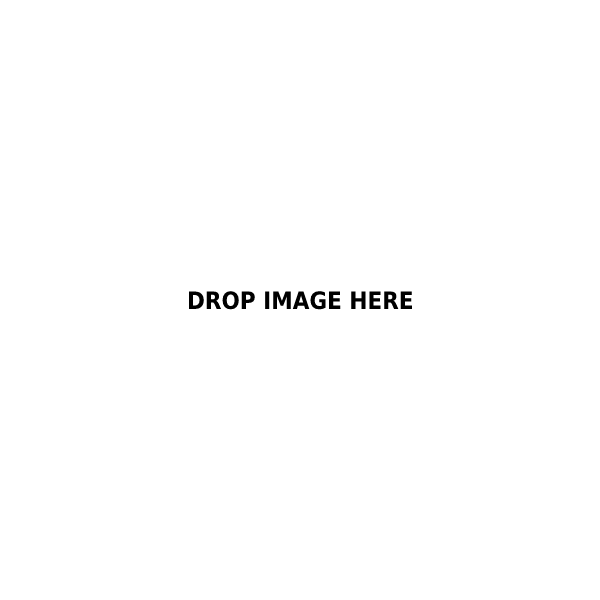
<style>
.page{position:relative;width:600px;height:600px;background:#ffffff}
.page>*{position:absolute;margin:0}
.t1{font:24px "DejaVuSansCondensed-Bold";color:#000000}
</style>
<div class="page">
<p class="t1" style="left:188px;top:291px;width:225px;height:19px">DROP IMAGE HERE</p>
</div>
